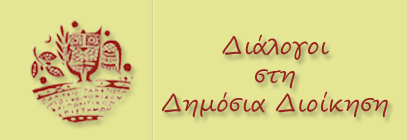
<style>
.page{position:relative;width:407px;height:140px;background:#e5e694}
.page>*{position:absolute;margin:0}
.t1{font:24px "SegoeScript";color:#992222}
</style>
<div class="page">
<p class="t1" style="left:162px;top:34px;width:226px;height:84px;text-align:center">Διάλογοι<br>στη<br>Δημόσια Διοίκηση</p>
</div>
